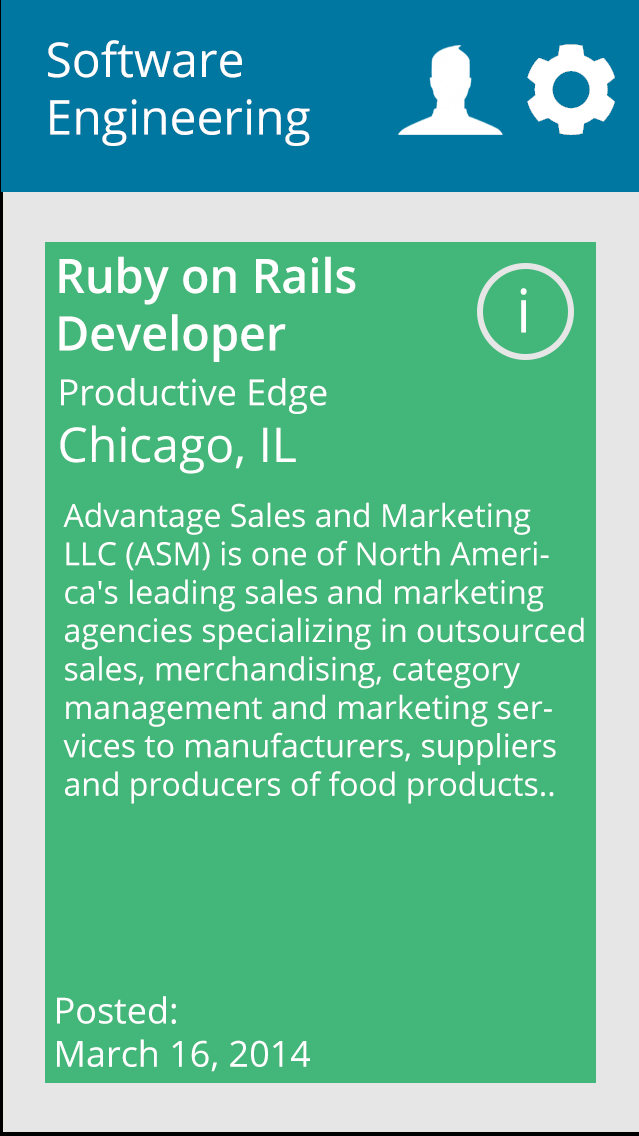
<style>
.page{position:relative;width:639px;height:1136px;background:#43b77a}
.page>*{position:absolute;margin:0}
.t1{font:48px "OpenSans";color:#ffffff}
.t2{font:47.9px "OpenSans-Semibold";color:#ffffff}
.t3{font:60.1px "OpenSans";color:#ffffff}
.t4{font:36px "OpenSans";color:#ffffff}
.t5{font:32px "OpenSans";color:#ffffff}
</style>
<div class="page">
<p class="t1" style="left:48px;top:40px;width:262px;height:106px">Software <br>Engineering</p>
<p class="t2" style="left:59px;top:256px;width:297px;height:106px">Ruby on Rails Developer</p>
<p class="t3" style="left:520px;top:288px;width:7px;height:45px">i</p>
<p class="t4" style="left:61px;top:378px;width:266px;height:36px">Productive Edge</p>
<p class="t1" style="left:60px;top:425px;width:236px;height:49px">Chicago, IL</p>
<p class="t5" style="left:63px;top:502px;width:521px;height:302px">Advantage Sales and Marketing LLC (ASM) is one of North America's leading sales and marketing agencies specializing in outsourced sales, merchandising, category management and marketing services to manufacturers, suppliers and producers of food products..</p>
<p class="t4" style="left:57px;top:996px;width:253px;height:76px">Posted:<br>March 16, 2014</p>
</div>
